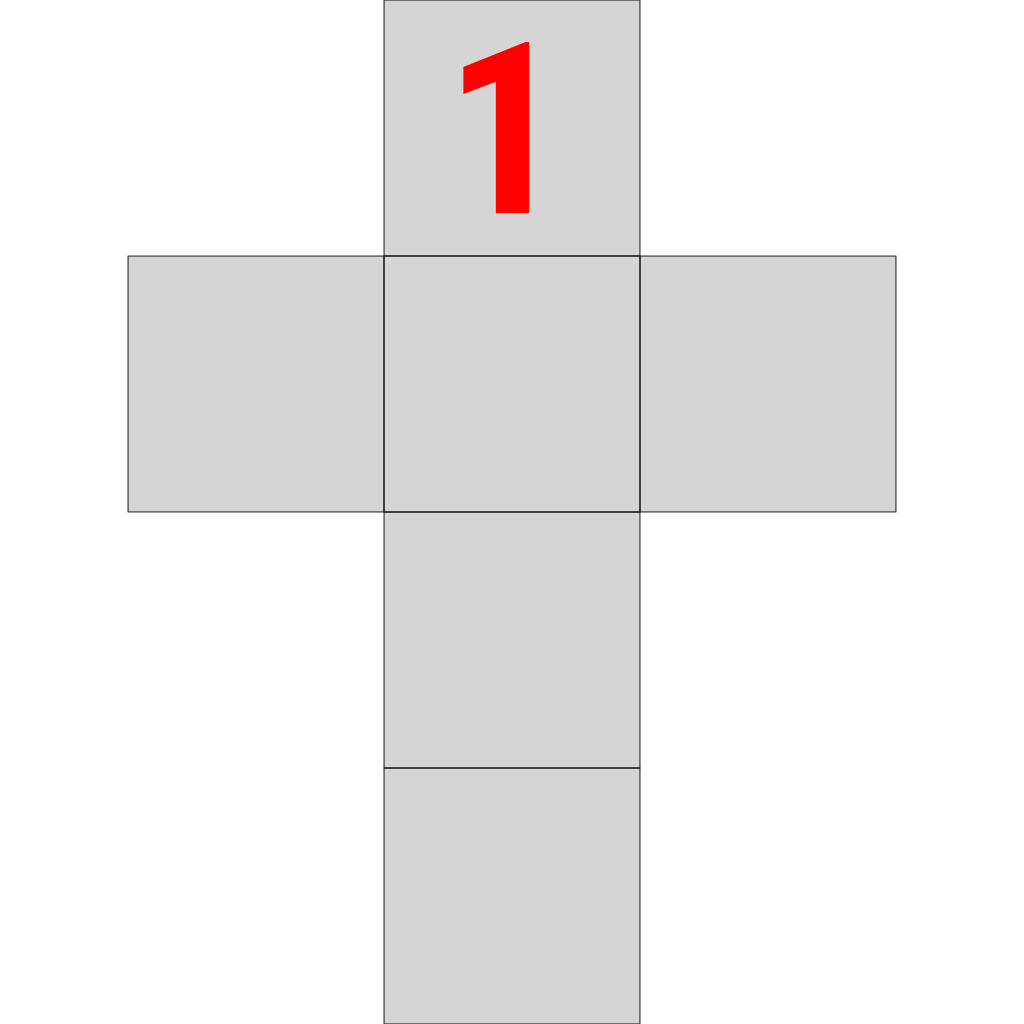
<style>
.page{position:relative;width:1024px;height:1024px;background:#ffffff}
.page>*{position:absolute;margin:0}
.t1{font:240px "RobotoCondensed-Bold";letter-spacing:0.1em;color:#ff0000}
</style>
<div class="page">
<p class="t1" style="left:463px;top:42px;width:67px;height:171px">1</p>
</div>
